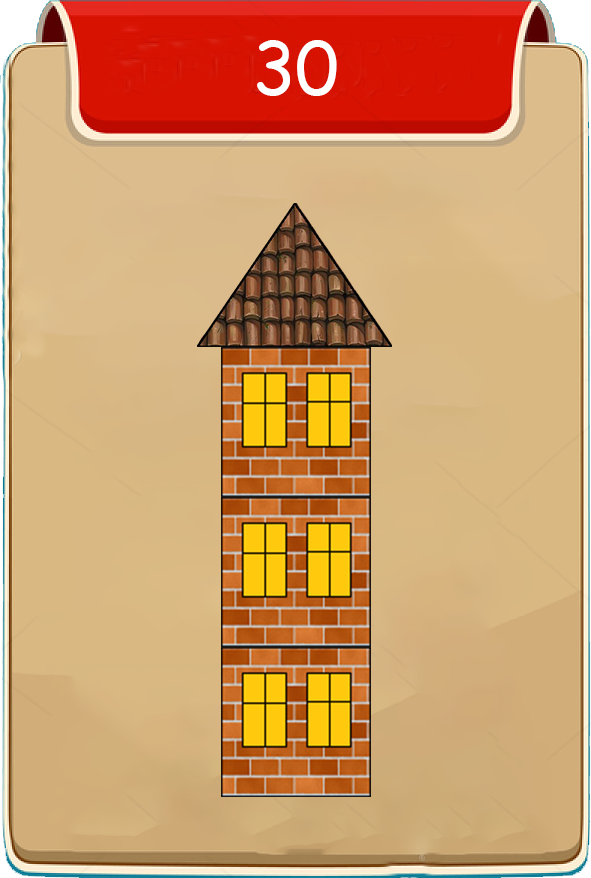
<style>
.page{position:relative;width:591px;height:878px}
.page>*{position:absolute;margin:0}
.t1{font:72px "ComicSansMS";letter-spacing:-0.02em;color:#ffffff}
</style>
<div class="page">
<p class="t1" style="left:257px;top:40px;width:80px;height:56px">30</p>
</div>
